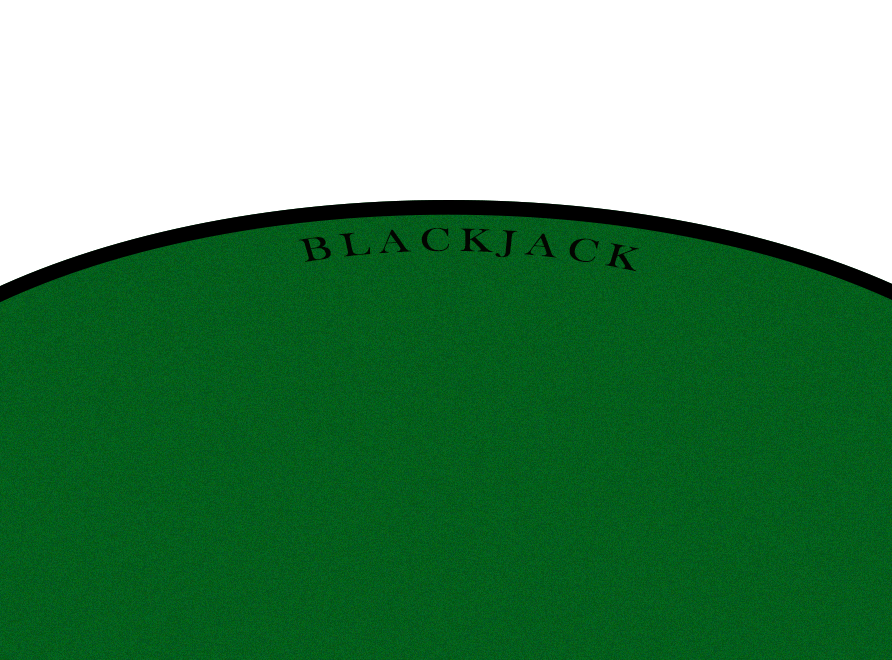
<style>
.page{position:relative;width:892px;height:660px;background:#ffffff}
.page>*{position:absolute;margin:0}
.t1{font:33.4px "BaskOldFace";letter-spacing:0.2em;color:#030501;scale:1.32 1}
</style>
<div class="page">
<p class="t1" style="left:298px;top:228px;width:342px;height:44px;rotate:2deg">BLACKJACK</p>
</div>
